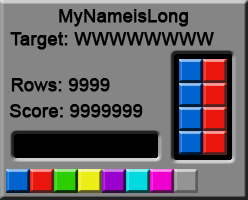
<style>
.page{position:relative;width:248px;height:200px;background:#858585}
.page>*{position:absolute;margin:0}
.t1{font:18px "ArialMT";color:#000000;font-weight:bold}
</style>
<div class="page">
<p class="t1" style="left:59px;top:9px;width:129px;height:18px">MyNameisLong</p>
<p class="t1" style="left:10px;top:32px;width:204px;height:18px">Target: WWWWWWWW</p>
<p class="t1" style="left:11px;top:78px;width:99px;height:14px">Rows: 9999</p>
<p class="t1" style="left:9px;top:104px;width:134px;height:14px">Score: 9999999</p>
</div>
